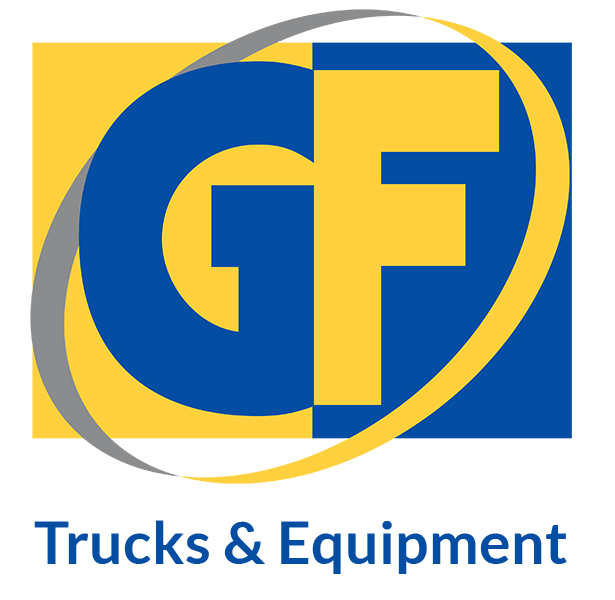
<style>
.page{position:relative;width:615px;height:600px;background:#ffffff}
.page>*{position:absolute;margin:0}
.t1{font:57.6px "Lato-Bold";letter-spacing:0.01em;color:#034ea2}
</style>
<div class="page">
<p class="t1" style="left:34px;top:520px;width:533px;height:54px">Trucks &amp; Equipment</p>
</div>
